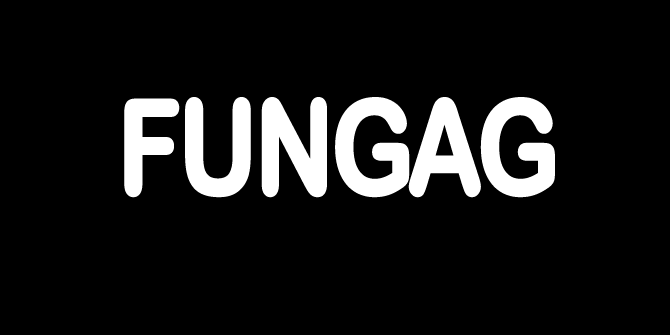
<style>
.page{position:relative;width:670px;height:335px;background:#000000}
.page>*{position:absolute;margin:0}
.t1{font:130.2px "ArialRoundedMTBold";letter-spacing:-0.05em;color:#ffffff;font-weight:bold;scale:0.8 1}
</style>
<div class="page">
<p class="t1" style="left:124px;top:97px;width:431px;height:101px">FUNGAG</p>
</div>
